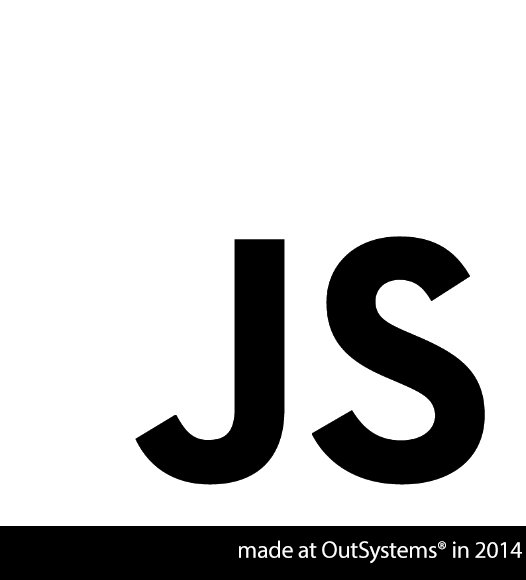
<style>
.page{position:relative;width:526px;height:580px;background:#ffffff}
.page>*{position:absolute;margin:0}
.t1{font:24px "MyriadPro-Regular";letter-spacing:-0.015em;color:#ffffff}
</style>
<div class="page">
<p class="t1" style="left:239px;top:540px;width:283px;height:24px">made at OutSystems® in 2014</p>
</div>
